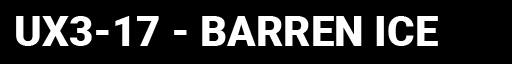
<style>
.page{position:relative;width:512px;height:64px;background:#000000}
.page>*{position:absolute;margin:0}
.t1{font:42px "Roboto-Black";color:#ffffff}
</style>
<div class="page">
<p class="t1" style="left:16px;top:16px;width:422px;height:30px">UX3-17 - BARREN ICE</p>
</div>
